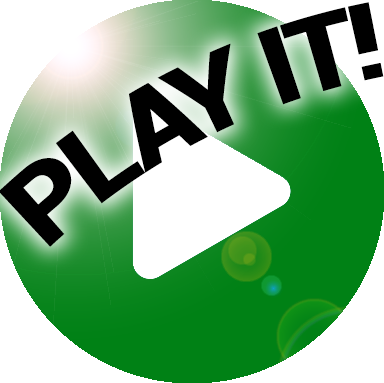
<style>
.page{position:relative;width:384px;height:383px;background:#ffffff}
.page>*{position:absolute;margin:0}
.t1{font:106.3px "Roboto-Black";letter-spacing:-0.04em;color:#000000}
</style>
<div class="page">
<p class="t1" style="left:0px;top:2px;width:384px;height:245px;rotate:-27deg">PLAY IT!</p>
</div>
